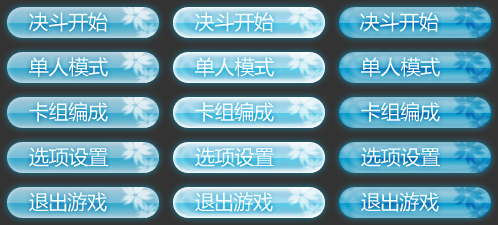
<style>
.page{position:relative;width:498px;height:225px}
.page>*{position:absolute;margin:0}
.t1{font:20px "MicrosoftYaHei";color:#ffffff}
</style>
<div class="page">
<p class="t1" style="left:29px;top:12px;width:79px;height:20px">决斗开始</p>
<p class="t1" style="left:195px;top:12px;width:79px;height:20px">决斗开始</p>
<p class="t1" style="left:360px;top:12px;width:79px;height:20px">决斗开始</p>
<p class="t1" style="left:29px;top:57px;width:79px;height:20px">单人模式</p>
<p class="t1" style="left:195px;top:57px;width:79px;height:20px">单人模式</p>
<p class="t1" style="left:361px;top:57px;width:79px;height:20px">单人模式</p>
<p class="t1" style="left:29px;top:102px;width:79px;height:20px">卡组编成</p>
<p class="t1" style="left:195px;top:102px;width:79px;height:20px">卡组编成</p>
<p class="t1" style="left:361px;top:102px;width:79px;height:20px">卡组编成</p>
<p class="t1" style="left:29px;top:147px;width:79px;height:20px">选项设置</p>
<p class="t1" style="left:195px;top:147px;width:79px;height:20px">选项设置</p>
<p class="t1" style="left:361px;top:147px;width:79px;height:20px">选项设置</p>
<p class="t1" style="left:29px;top:192px;width:78px;height:20px">退出游戏</p>
<p class="t1" style="left:195px;top:192px;width:78px;height:20px">退出游戏</p>
<p class="t1" style="left:361px;top:192px;width:78px;height:20px">退出游戏</p>
</div>
